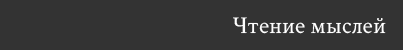
<style>
.page{position:relative;width:403px;height:50px;background:#333333}
.page>*{position:absolute;margin:0}
.t1{font:24px "CrimsonText-Regular";color:#ffffff}
</style>
<div class="page">
<p class="t1" style="left:233px;top:17px;width:153px;height:17px">Чтение мыслей</p>
</div>
